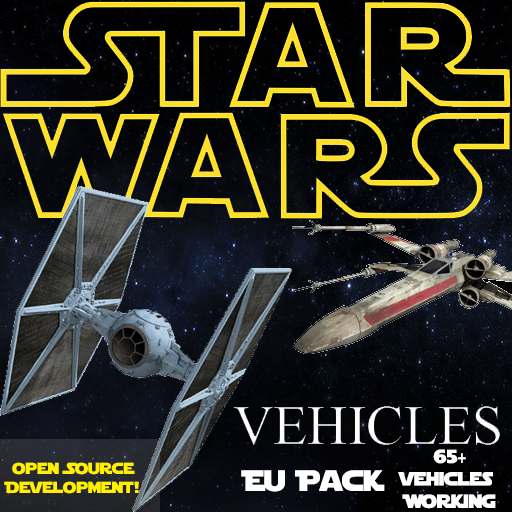
<style>
.page{position:relative;width:512px;height:512px}
.page>*{position:absolute;margin:0}
.t1{font:18.7px "StarJedi";color:#ffffff}
.t2{font:18.7px "ArchivoNarrow-Regular";color:#ffffff}
.t3{font:16px "StarJedi";color:#fff000}
.t4{font:29.3px "StarJedi";color:#ffffff}
</style>
<div class="page">
<p class="t1" style="left:398px;top:449px;width:98px;height:60px;text-align:center">65<span class="t2">+<br></span>vehicles <br>Working</p>
<p class="t3" style="left:4px;top:462px;width:135px;height:32px;text-align:center">open Source <br>Development!</p>
<p class="t4" style="left:241px;top:470px;width:144px;height:22px">Eu Pack</p>
</div>
